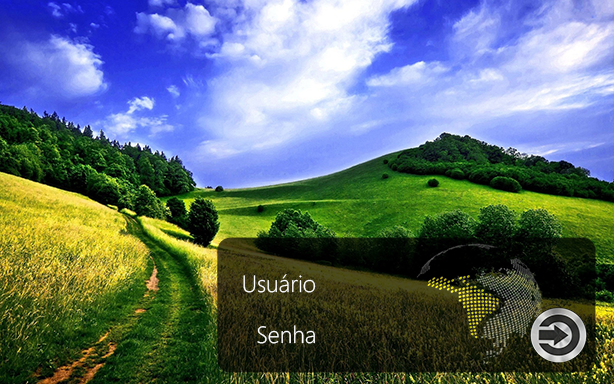
<style>
.page{position:relative;width:614px;height:384px}
.page>*{position:absolute;margin:0}
.t1{font:23.5px "SegoeUI-Light";color:#ffffff}
</style>
<div class="page">
<p class="t1" style="left:243px;top:274px;width:73px;height:19px">Usuário</p>
<p class="t1" style="left:257px;top:325px;width:58px;height:19px">Senha</p>
</div>
